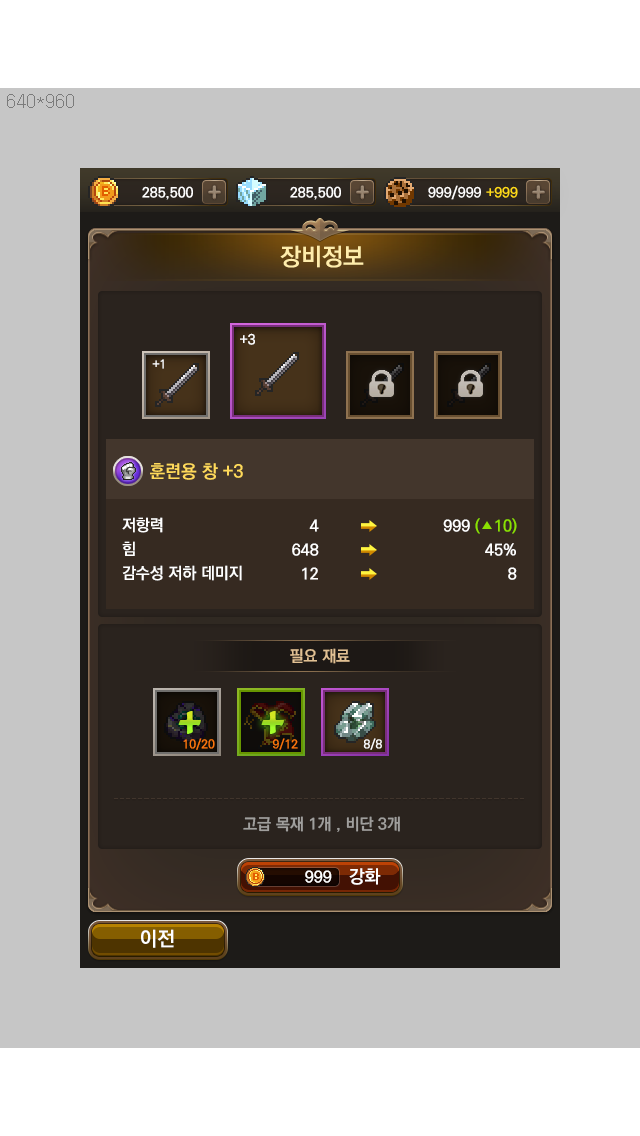
<style>
.page{position:relative;width:640px;height:1136px;background:#c6c6c6}
.page>*{position:absolute;margin:0}
.t1{font:24px "KoPubDotumBold";color:#ffedab}
.t2{font:14px "KoPubDotumBold";color:#ffffff}
.t3{font:12px "KoPubDotumBold";color:#ffffff}
.t4{font:18px "KoPubDotumBold";color:#ffda5b}
.t5{font:16px/24px "KoPubDotumBold";color:#ffffff}
.t6{font:16px/24px "KoPubDotumBold";color:#8ae001}
.t7{font:16px "KoPubDotumBold";color:#e1c093}
.t8{font:16px "KoPubDotumBold";color:#a09f9d}
.t9{font:16px "KoPubDotumBold";color:#ffffff}
.t10{font:18px "KoPubDotumBold";color:#ffffff}
.t11{font:20px "KoPubDotumBold";color:#ffffff}
</style>
<div class="page">
<p class="t1" style="left:280px;top:245px;width:84px;height:23px">장비정보</p>
<p class="t2" style="left:240px;top:333px;width:15px;height:12px">+3</p>
<p class="t3" style="left:152px;top:359px;width:12px;height:10px">+1</p>
<p class="t4" style="left:150px;top:463px;width:93px;height:17px">훈련용 창 +3</p>
<p class="t5" style="left:122px;top:517px;width:120px;height:64px">저항력<br>힘 <br>감수성 저하 데미지</p>
<p class="t5" style="left:292px;top:519px;width:27px;height:61px;text-align:right">4<br>648<br>12</p>
<p class="t6" style="left:443px;top:518px;width:74px;height:62px;text-align:right"><span class="t5">999 </span>(   10)<br><span class="t5">45%<br>8</span></p>
<p class="t7" style="left:290px;top:648px;width:60px;height:16px">필요 재료</p>
<p class="t8" style="left:243px;top:816px;width:157px;height:16px">고급 목재 1개 , 비단 3개</p>
<p class="t9" style="left:305px;top:870px;width:27px;height:13px">999</p>
<p class="t10" style="left:349px;top:868px;width:32px;height:17px">강화</p>
<p class="t11" style="left:141px;top:929px;width:33px;height:19px">이전</p>
</div>
